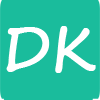
<style>
.page{position:relative;width:100px;height:100px;background:#1abc9c}
.page>*{position:absolute;margin:0}
.t1{font:60px "SegoePrint";color:#ffffff;font-weight:bold}
</style>
<div class="page">
<p class="t1" style="left:6px;top:26px;width:90px;height:47px">DK</p>
</div>
